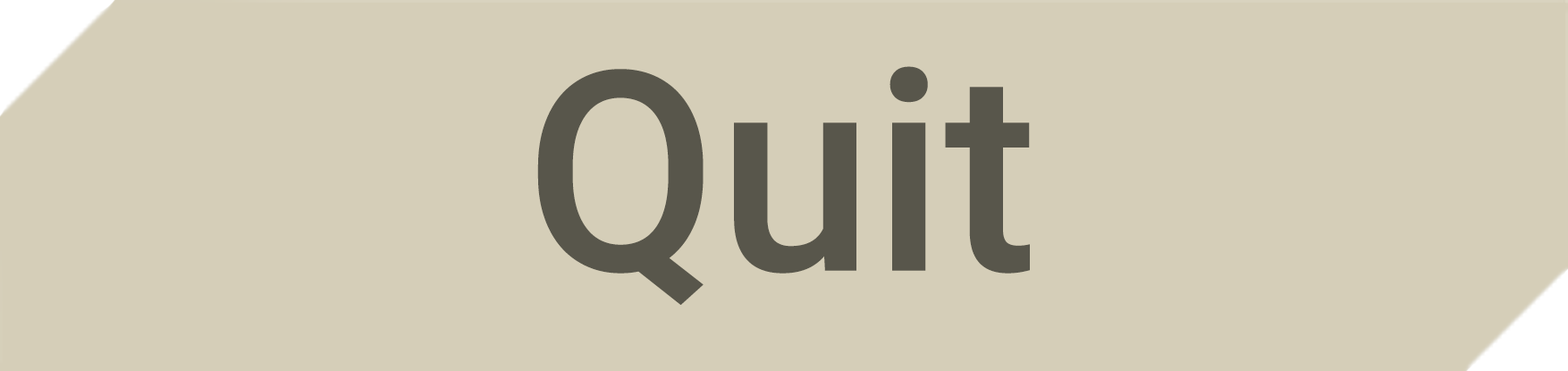
<style>
.page{position:relative;width:1568px;height:371px;background:#d5ceb8}
.page>*{position:absolute;margin:0}
.t1{font:279.4px "Roboto-Medium";color:#58564b}
</style>
<div class="page">
<p class="t1" style="left:537px;top:66px;width:493px;height:239px">Quit</p>
</div>
